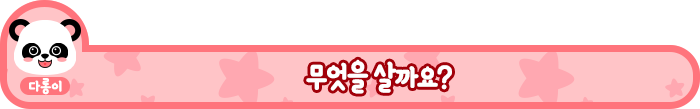
<style>
.page{position:relative;width:700px;height:109px;background:#ffffff}
.page>*{position:absolute;margin:0}
.t1{font:2.6px "HeadlineR-HM";letter-spacing:0.2em;color:#ff424d;font-weight:bold;scale:1.26 1}
.t2{font:35.3px "YanoljaYacheR";letter-spacing:-0.075em;color:#ffffff;font-weight:bold}
.t3{font:17.6px "YanoljaYacheR";letter-spacing:-0.025em;color:#ffffff;font-weight:bold}
</style>
<div class="page">
<p class="t1" style="left:43px;top:63px;width:4px;height:3px">♥</p>
<p class="t2" style="left:306px;top:59px;width:146px;height:35px">무엇을 살까요?</p>
<p class="t3" style="left:29px;top:78px;width:33px;height:17px">다롱이</p>
</div>
